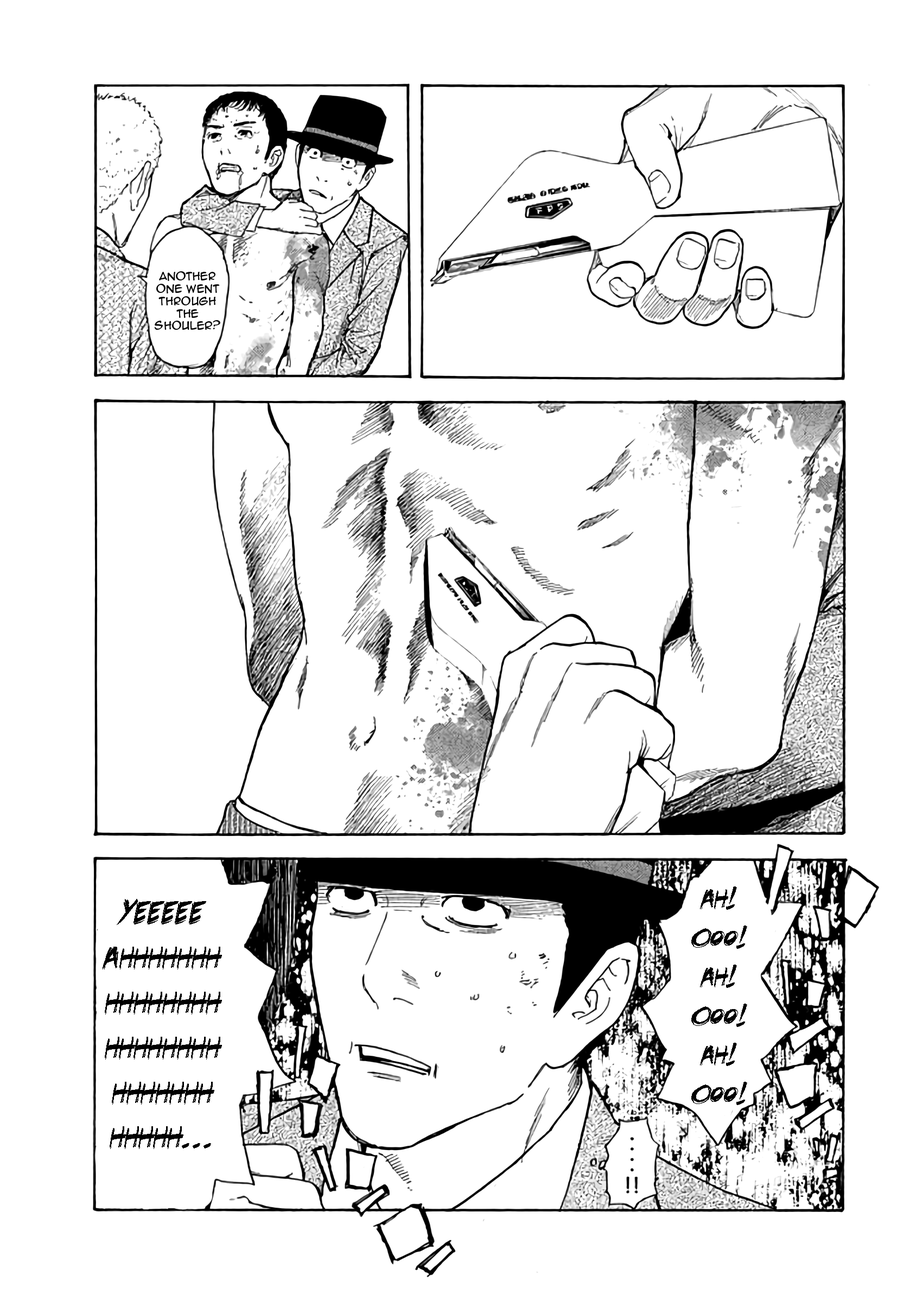
<style>
.page{position:relative;width:916px;height:1302px;background:#ffffff}
.page>*{position:absolute;margin:0}
.t1{font:10.3px "AnimeAce2.0BB";color:#000000}
.t2{font:32.6px "DeathRattleBB";color:#000000}
.t3{font:37.4px "DeathRattleBB";color:#000000}
</style>
<div class="page">
<p class="t1" style="left:154px;top:271px;width:66px;height:59px;text-align:center">another one went through the shouler?</p>
<p class="t2" style="left:691px;top:886px;width:56px;height:219px;text-align:center">Ah! Ooo!<br>Ah! Ooo!<br>Ah! Ooo!</p>
<p class="t3" style="left:103px;top:899px;width:119px;height:250px;text-align:center">Yeeeee Ahhhhhhh hhhhhhhh hhhhhhhh hhhhhhh hhhhh...</p>
</div>
